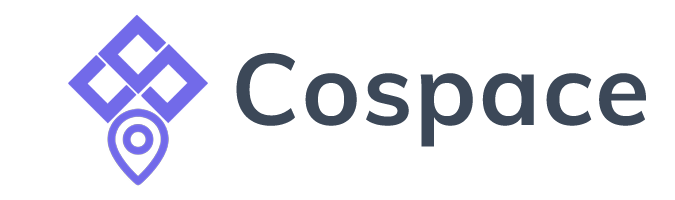
<style>
.page{position:relative;width:675px;height:200px;background:#ffffff}
.page>*{position:absolute;margin:0}
.t1{font:100px "Muli-Bold";letter-spacing:0.02em;color:#3c4858}
</style>
<div class="page">
<p class="t1" style="left:236px;top:53px;width:410px;height:94px">Cospace</p>
</div>
